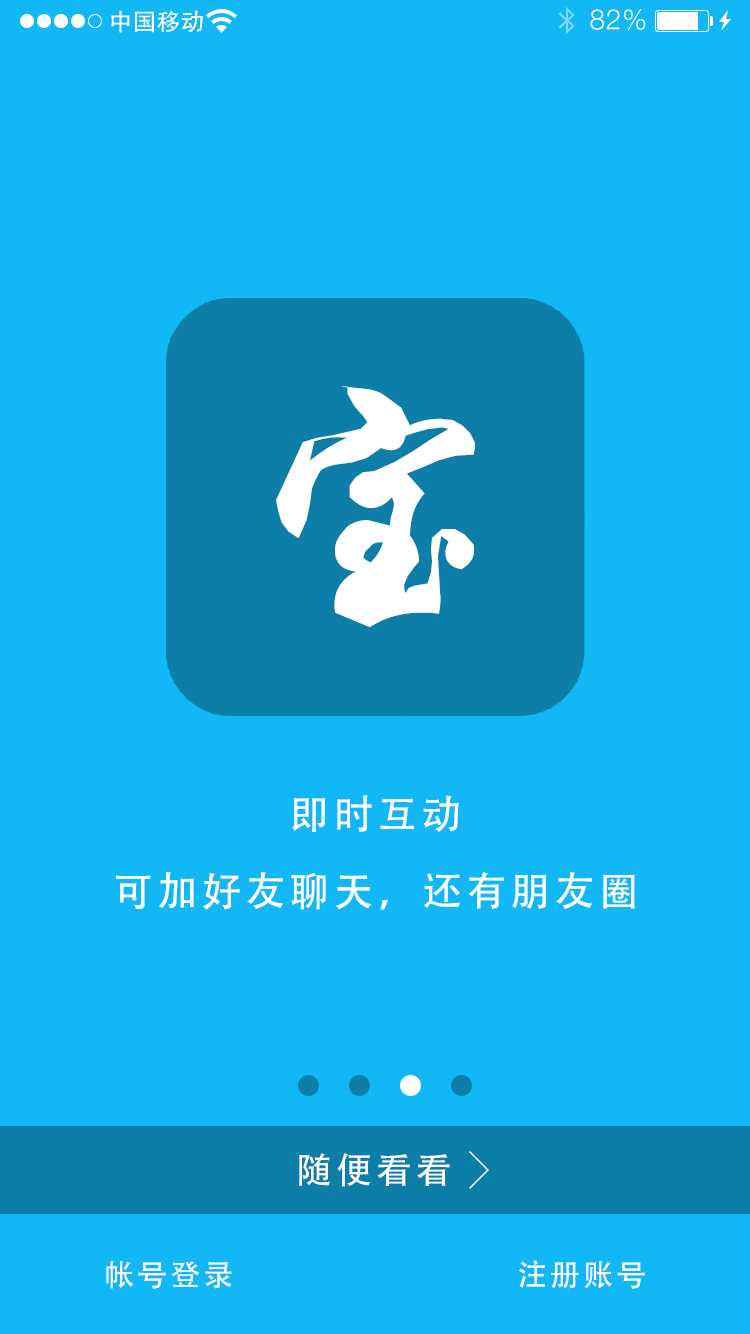
<style>
.page{position:relative;width:750px;height:1334px;background:#12b8f6}
.page>*{position:absolute;margin:0}
.t1{font:284.9px "RS_XingKai";letter-spacing:0.104em;color:#ffffff}
.t2{font:40px "AdobeHeitiStd-Regular";letter-spacing:0.104em;color:#ffffff}
.t3{font:40px "AdobeHeitiStd-Regular";letter-spacing:0.104em;color:#feffff}
.t4{font:36px "AdobeHeitiStd-Regular";letter-spacing:0.104em;color:#fefefe}
.t5{font:30px "AdobeHeitiStd-Regular";letter-spacing:0.104em;color:#fefefe}
</style>
<div class="page">
<p class="t1" style="left:276px;top:386px;width:199px;height:241px">宝</p>
<p class="t2" style="left:292px;top:795px;width:167px;height:37px">即时互动</p>
<p class="t3" style="left:116px;top:872px;width:519px;height:38px">可加好友聊天，还有朋友圈</p>
<p class="t4" style="left:299px;top:1153px;width:151px;height:34px">随便看看</p>
<p class="t5" style="left:106px;top:1261px;width:126px;height:28px">帐号登录</p>
<p class="t5" style="left:519px;top:1260px;width:126px;height:29px">注册账号</p>
</div>
